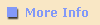
<style>
.page{position:relative;width:100px;height:25px;background:#f9e7c5}
.page>*{position:absolute;margin:0}
.t1{font:12px "Verdana-Bold";color:#8399f8}
</style>
<div class="page">
<p class="t1" style="left:26px;top:7px;width:62px;height:10px">More Info</p>
</div>
